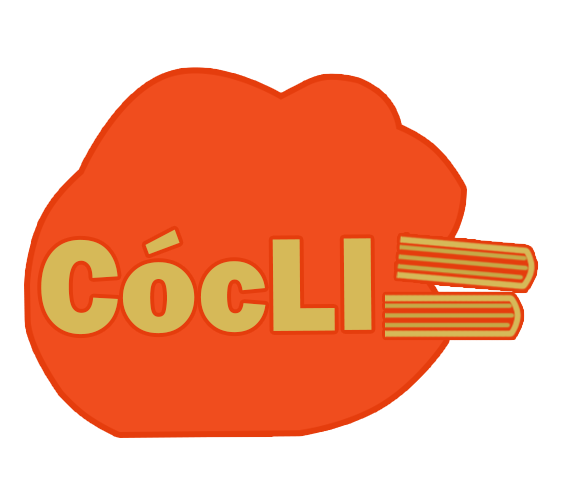
<style>
.page{position:relative;width:564px;height:489px;background:#ffffff}
.page>*{position:absolute;margin:0}
.t1{font:137px "FranklinGothic-Heavy";color:#d6b958;scale:0.95 1}
</style>
<div class="page">
<p class="t1" style="left:41px;top:229px;width:331px;height:106px">CócLI</p>
</div>
